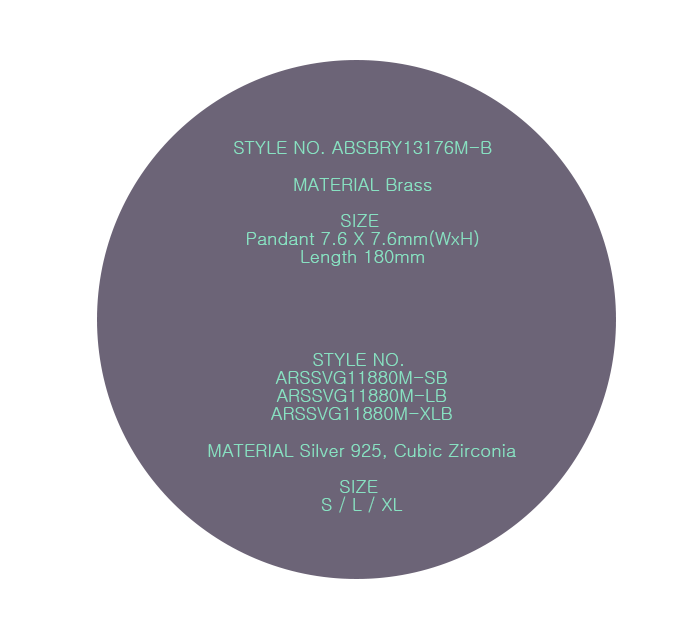
<style>
.page{position:relative;width:679px;height:640px;background:#ffffff}
.page>*{position:absolute;margin:0}
.t1{font:18px/18px "Gulim";color:#88e1c2}
</style>
<div class="page">
<p class="t1" style="left:234px;top:141px;width:258px;height:125px;text-align:center">STYLE NO. ABSBRY13176M-B<br><br>MATERIAL Brass<br><br>SIZE <br>Pandant 7.6 X 7.6mm(WxH)<br>Length 180mm</p>
<p class="t1" style="left:208px;top:353px;width:308px;height:160px;text-align:center">STYLE NO. <br>ARSSVG11880M-SB<br>ARSSVG11880M-LB<br>ARSSVG11880M-XLB<br><br>MATERIAL Silver 925, Cubic Zirconia<br><br>SIZE <br>S / L / XL</p>
</div>
